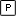
<style>
.page{position:relative;width:16px;height:16px;background:#ffffff}
.page>*{position:absolute;margin:0}
.t1{font:10px "ArialMT";color:#000000}
</style>
<div class="page">
<p class="t1" style="left:6px;top:4px;width:5px;height:7px">P</p>
</div>
